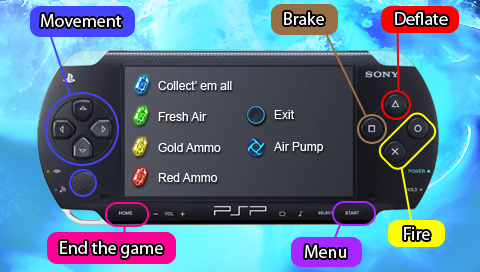
<style>
.page{position:relative;width:480px;height:272px}
.page>*{position:absolute;margin:0}
.t1{font:18px "MyriadPro-Regular";color:#ffffff}
.t2{font:12px "ArialMT";color:#ffffff}
</style>
<div class="page">
<p class="t1" style="left:41px;top:14px;width:81px;height:13px">Movement</p>
<p class="t1" style="left:284px;top:12px;width:40px;height:13px">Brake</p>
<p class="t1" style="left:395px;top:12px;width:53px;height:13px">Deflate</p>
<p class="t2" style="left:158px;top:81px;width:74px;height:9px">Collect’ em all</p>
<p class="t2" style="left:158px;top:112px;width:49px;height:9px">Fresh Air</p>
<p class="t2" style="left:274px;top:110px;width:20px;height:9px">Exit</p>
<p class="t2" style="left:158px;top:143px;width:63px;height:9px">Gold Ammo</p>
<p class="t2" style="left:274px;top:142px;width:49px;height:11px">Air Pump</p>
<p class="t2" style="left:158px;top:173px;width:60px;height:9px">Red Ammo</p>
<p class="t1" style="left:404px;top:227px;width:26px;height:13px">Fire</p>
<p class="t1" style="left:60px;top:241px;width:103px;height:17px">End the game</p>
<p class="t1" style="left:305px;top:245px;width:41px;height:13px">Menu</p>
</div>
